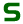
<style>
.page{position:relative;width:23px;height:24px;background:#ffffff}
.page>*{position:absolute;margin:0}
.t1{font:25.9px "HanzelNormal";color:#006600;scale:0.95 1}
</style>
<div class="page">
<p class="t1" style="left:3px;top:2px;width:18px;height:20px">S</p>
</div>
